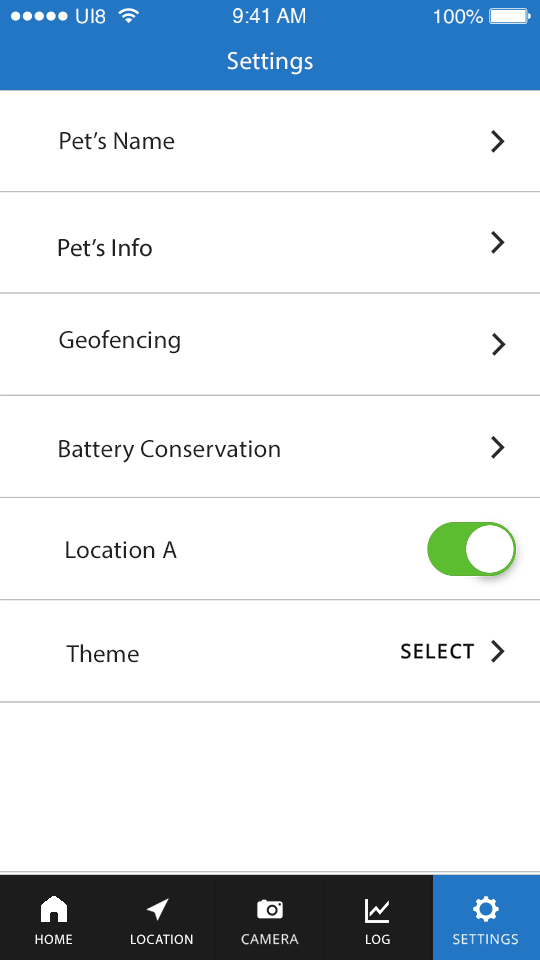
<style>
.page{position:relative;width:540px;height:960px;background:#ffffff}
.page>*{position:absolute;margin:0}
.t1{font:19.8px "Helvetica";color:#ffffff}
.t2{font:25px "MyriadPro-Regular";letter-spacing:0.01em;color:#ffffff}
.t3{font:25px "MyriadPro-Regular";letter-spacing:0.01em;color:#202020}
.t4{font:13.6px "MyriadPro-Regular";letter-spacing:0.05em;color:#ffffff;text-transform:uppercase}
.t5{font:13.6px "OpenSans";letter-spacing:0.05em;color:#ffffff;text-transform:uppercase}
</style>
<div class="page">
<p class="t1" style="left:76px;top:8px;width:29px;height:16px">UI8</p>
<p class="t1" style="left:233px;top:8px;width:72px;height:15px">9:41 AM</p>
<p class="t1" style="left:434px;top:9px;width:49px;height:15px">100%</p>
<p class="t2" style="left:227px;top:52px;width:86px;height:23px">Settings</p>
<p class="t3" style="left:60px;top:132px;width:115px;height:18px">Pet’s Name</p>
<p class="t3" style="left:59px;top:330px;width:121px;height:24px">Geofencing</p>
<p class="t3" style="left:59px;top:440px;width:221px;height:23px">Battery Conservation</p>
<p class="t3" style="left:66px;top:541px;width:166px;height:18px">Location Access</p>
<p class="t3" style="left:66px;top:644px;width:73px;height:19px">Theme</p>
<p class="t4" style="left:35px;top:934px;width:37px;height:10px">HOME</p>
<p class="t4" style="left:131px;top:934px;width:62px;height:10px">LOCATION</p>
<p class="t5" style="left:241px;top:934px;width:58px;height:11px">camera</p>
<p class="t4" style="left:366px;top:934px;width:24px;height:10px">LOG</p>
<p class="t5" style="left:453px;top:934px;width:65px;height:11px">settings</p>
</div>
